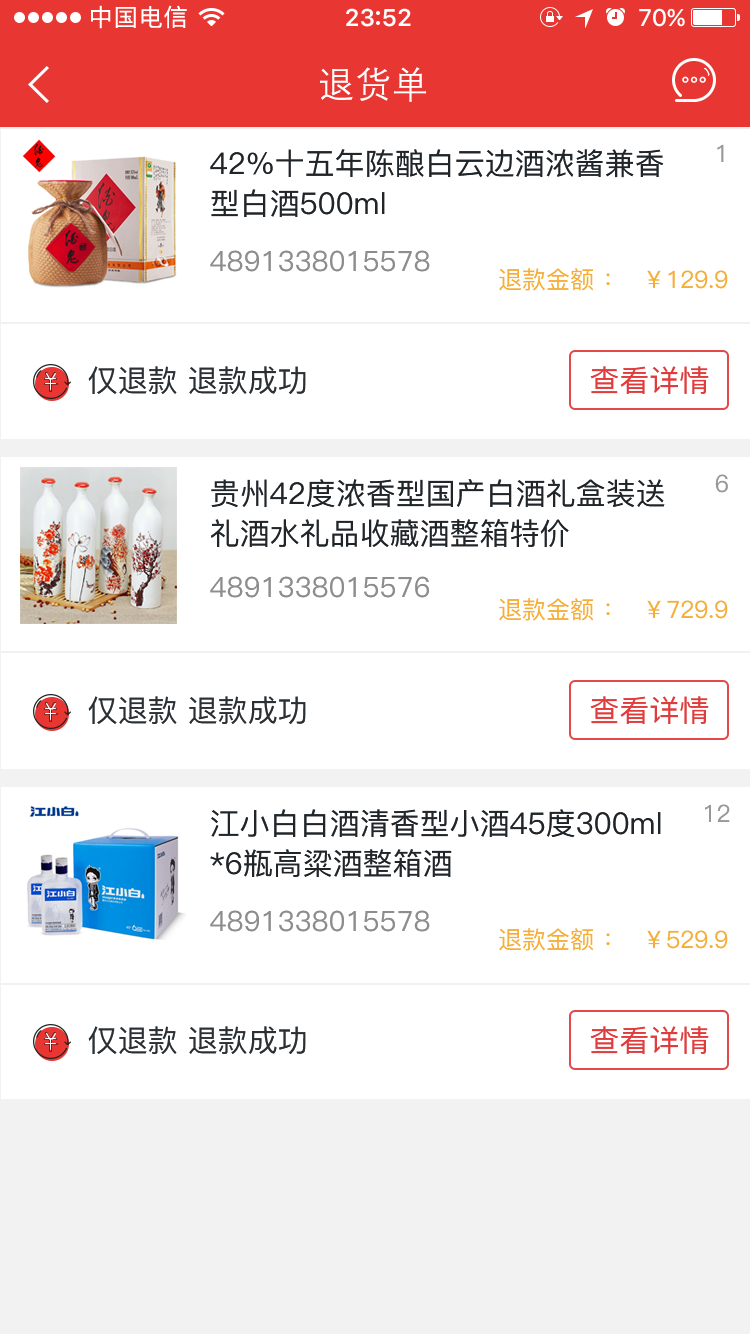
<style>
.page{position:relative;width:750px;height:1334px;background:#ffffff}
.page>*{position:absolute;margin:0}
.t1{font:36px "DengXian";letter-spacing:0.03em;color:#ffffff}
.t2{font:30px/40px "PingFang-SC-Medium";color:#202529}
.t3{font:28px/19px "PingFang-SC-Medium";color:#8d8d8d}
.t4{font:24px "PingFang-SC-Medium";color:#989898}
.t5{font:24px "PingFang-SC-Medium";color:#f5af39}
.t6{font:30px "PingFang-SC-Medium";color:#2b3034}
.t7{font:30px "PingFang-SC-Medium";color:#e13c3c}
.t8{font:30px/36px "PingFang-SC-Medium";color:#202529}
</style>
<div class="page">
<p class="t1" style="left:320px;top:67px;width:106px;height:35px">退货单</p>
<p class="t2" style="left:210px;top:149px;width:454px;height:123px">42%十五年陈酿白云边酒浓酱兼香<br>型白酒500ml<br><br><span class="t3">4891338015578</span></p>
<p class="t4" style="left:717px;top:144px;width:7px;height:18px">1</p>
<p class="t5" style="left:499px;top:268px;width:229px;height:23px">退款金额 ：  ￥129.9</p>
<p class="t6" style="left:88px;top:366px;width:218px;height:28px">仅退款 退款成功</p>
<p class="t7" style="left:590px;top:366px;width:119px;height:28px">查看详情</p>
<p class="t2" style="left:210px;top:479px;width:455px;height:119px">贵州42度浓香型国产白酒礼盒装<span class="t8">送<br>礼酒水礼品收藏酒整箱特价<br><br></span><span class="t3">4891338015576</span></p>
<p class="t4" style="left:715px;top:474px;width:13px;height:19px">6</p>
<p class="t5" style="left:499px;top:598px;width:229px;height:23px">退款金额 ：  ￥729.9</p>
<p class="t6" style="left:88px;top:696px;width:218px;height:28px">仅退款 退款成功</p>
<p class="t7" style="left:590px;top:696px;width:119px;height:28px">查看详情</p>
<p class="t2" style="left:210px;top:809px;width:451px;height:123px">江小白白酒清香型小酒45度300ml<br>*6瓶高粱酒整箱酒<br><br><span class="t3">4891338015578</span></p>
<p class="t4" style="left:705px;top:804px;width:25px;height:18px">12</p>
<p class="t5" style="left:499px;top:928px;width:229px;height:23px">退款金额 ：  ￥529.9</p>
<p class="t6" style="left:88px;top:1026px;width:218px;height:28px">仅退款 退款成功</p>
<p class="t7" style="left:590px;top:1026px;width:119px;height:28px">查看详情</p>
</div>
